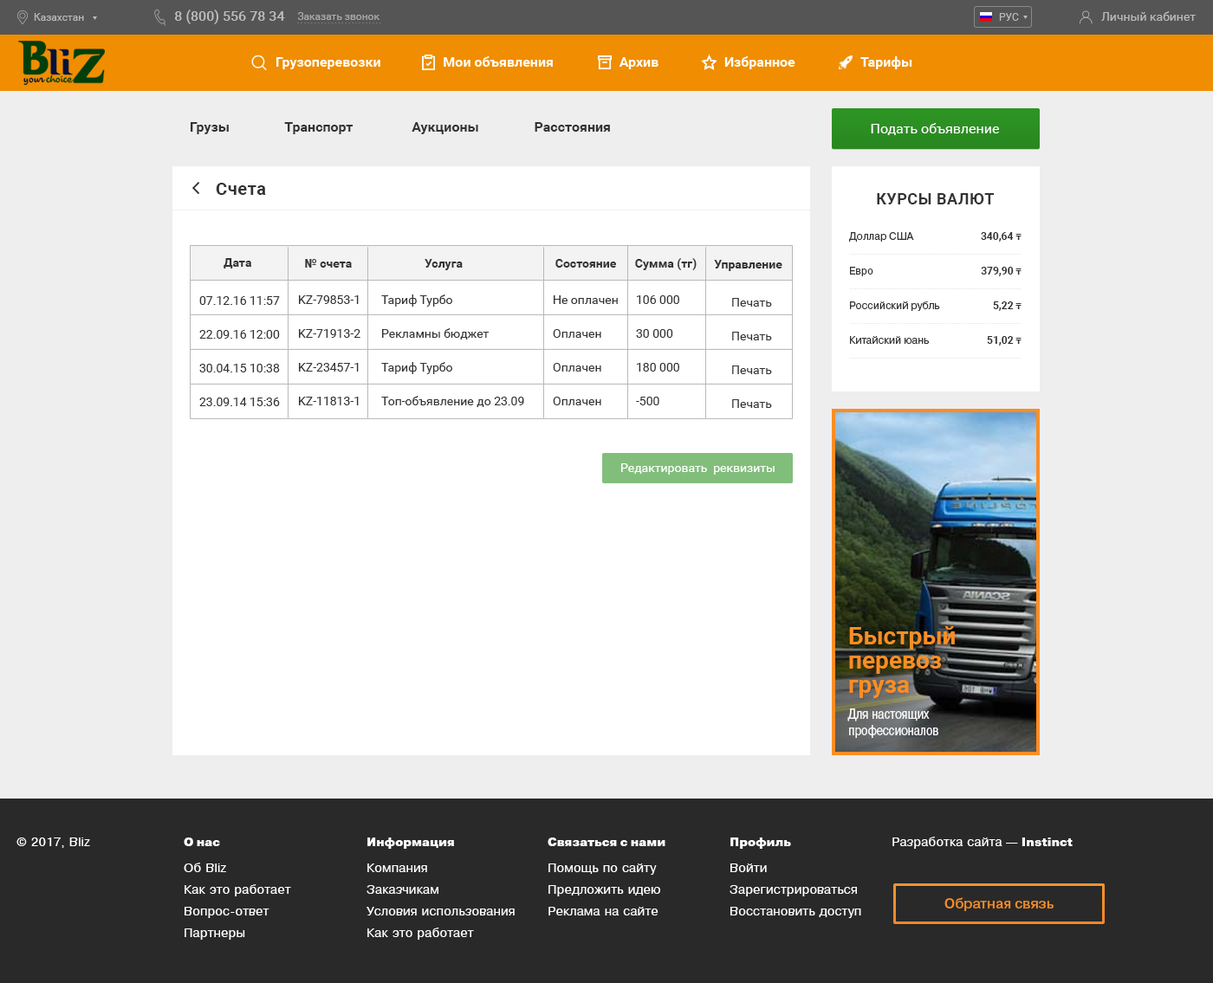
<style>
.page{position:relative;width:1213px;height:983px;background:#ffffff}
.page>*{position:absolute;margin:0}
.t1{font:13.9px "Roboto-Bold";color:#333333}
.t2{font:13.9px "Roboto-Regular";color:#ffffff}
.t3{font:17.3px "Roboto-Bold";letter-spacing:0.03em;color:#333333}
.t4{font:15.6px "Roboto-Bold";letter-spacing:0.03em;color:#333333;text-transform:uppercase}
.t5{font:10.4px/34.7px "PragmaticaBook-Reg";color:#333333}
.t6{font:12.1px/34.7px "PragmaticaBlack";letter-spacing:0.03em;color:#333333;text-transform:uppercase}
.t7{font:10.4px/34.7px "Roboto-Bold";color:#303030}
.t8{font:8.7px/34.7px "TimesNewRomanPS-BoldMT";color:#303030}
.t9{font:12.1px "Roboto-Bold";color:#333333}
.t10{font:12.1px/20.8px "Roboto-Regular";color:#333333}
.t11{font:12.1px "Roboto-Regular";color:#ffffff}
</style>
<div class="page">
<p class="t1" style="left:191px;top:122px;width:419px;height:12px">Грузы                Транспорт                 Аукционы                Расстояния</p>
<p class="t2" style="left:871px;top:123px;width:128px;height:12px">Подать объявление</p>
<p class="t3" style="left:216px;top:183px;width:50px;height:12px">Счета</p>
<p class="t4" style="left:877px;top:193px;width:117px;height:11px">Курсы валют</p>
<p class="t5" style="left:849px;top:232px;width:91px;height:112px;text-align:center"><span class="t6"><br></span>Доллар США<br>Евро<br>Российский рубль<br>Китайский юань</p>
<p class="t7" style="left:981px;top:232px;width:40px;height:114px;text-align:right">340,64 <span class="t8">₸<br></span>379,90 <span class="t8">₸<br></span>5,22 <span class="t8">₸<br></span>51,02 <span class="t8">₸</span></p>
<p class="t9" style="left:223px;top:258px;width:28px;height:11px">Дата</p>
<p class="t9" style="left:305px;top:259px;width:47px;height:9px">№ счета</p>
<p class="t9" style="left:424px;top:259px;width:39px;height:11px">Услуга</p>
<p class="t9" style="left:555px;top:259px;width:62px;height:9px">Состояние</p>
<p class="t9" style="left:635px;top:258px;width:61px;height:12px">Сумма (тг)</p>
<p class="t9" style="left:714px;top:260px;width:68px;height:11px">Управление</p>
<p class="t10" style="left:199px;top:296px;width:81px;height:110px">07.12.16 11:57<br>22.09.16 12:00<br>30.04.15 10:38<br>23.09.14 15:36</p>
<p class="t10" style="left:299px;top:295px;width:61px;height:110px">KZ-79853-1<br>KZ-71913-2<br>KZ-23457-1<br>KZ-11813-1</p>
<p class="t10" style="left:381px;top:295px;width:143px;height:112px">Тариф Турбо<br>Рекламны бюджет<br>Тариф Турбо<br>Топ-объявление до 23.09</p>
<p class="t10" style="left:553px;top:295px;width:65px;height:110px">Не оплачен<br>Оплачен<br>Оплачен<br>Оплачен</p>
<p class="t10" style="left:636px;top:295px;width:43px;height:110px">106 000 <br>30 000 <br>180 000<br>-500</p>
<p class="t10" style="left:732px;top:298px;width:40px;height:110px">Печать<br>Печать<br>Печать<br>Печать</p>
<p class="t11" style="left:621px;top:463px;width:153px;height:12px">Редактировать  реквизиты</p>
</div>
